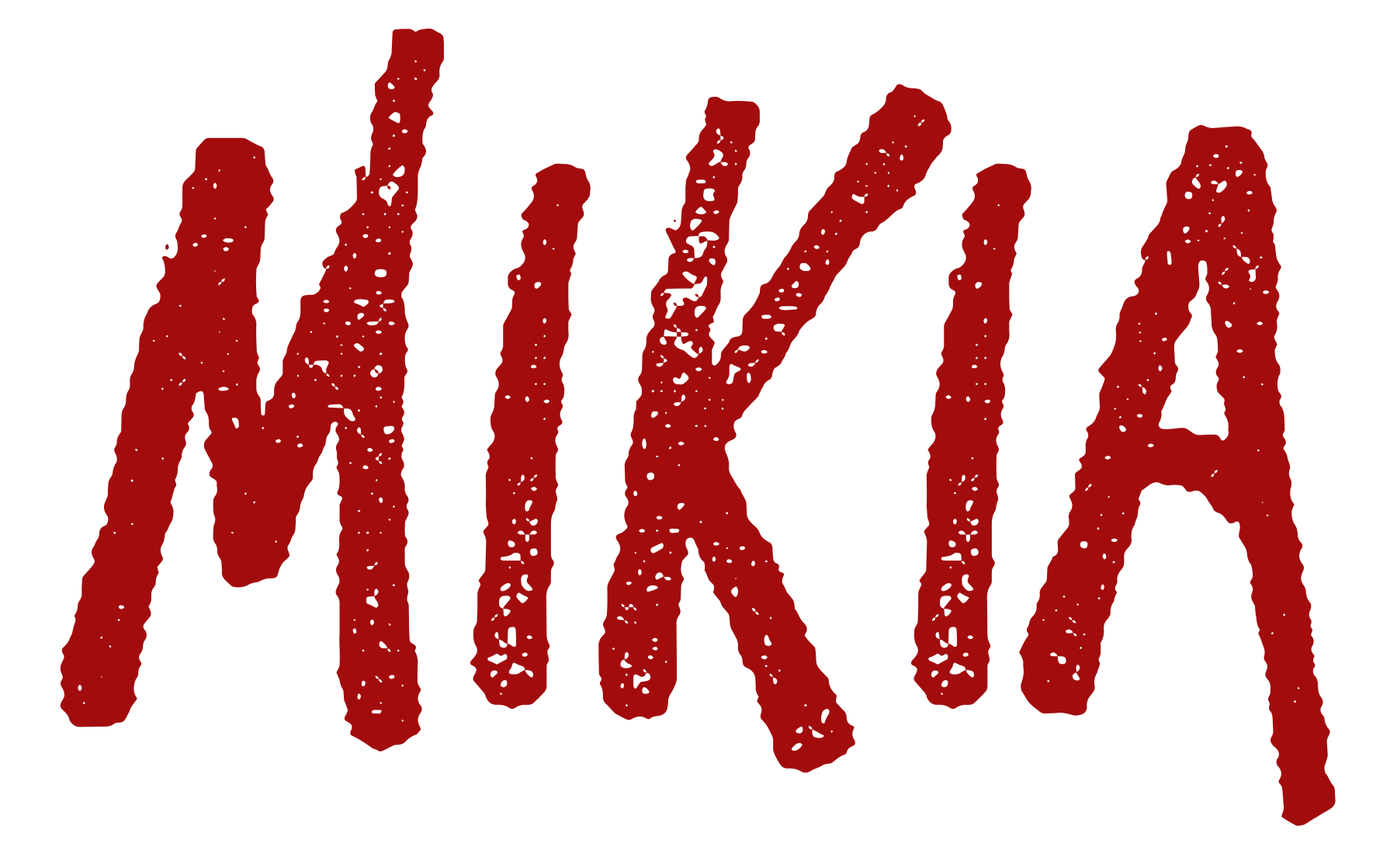
<style>
.page{position:relative;width:1397px;height:854px;background:#ffffff}
.page>*{position:absolute;margin:0}
.t1{font:808.4px "Brink";color:#a20c0d}
</style>
<div class="page">
<p class="t1" style="left:60px;top:28px;width:1276px;height:798px">MIKIA</p>
</div>
